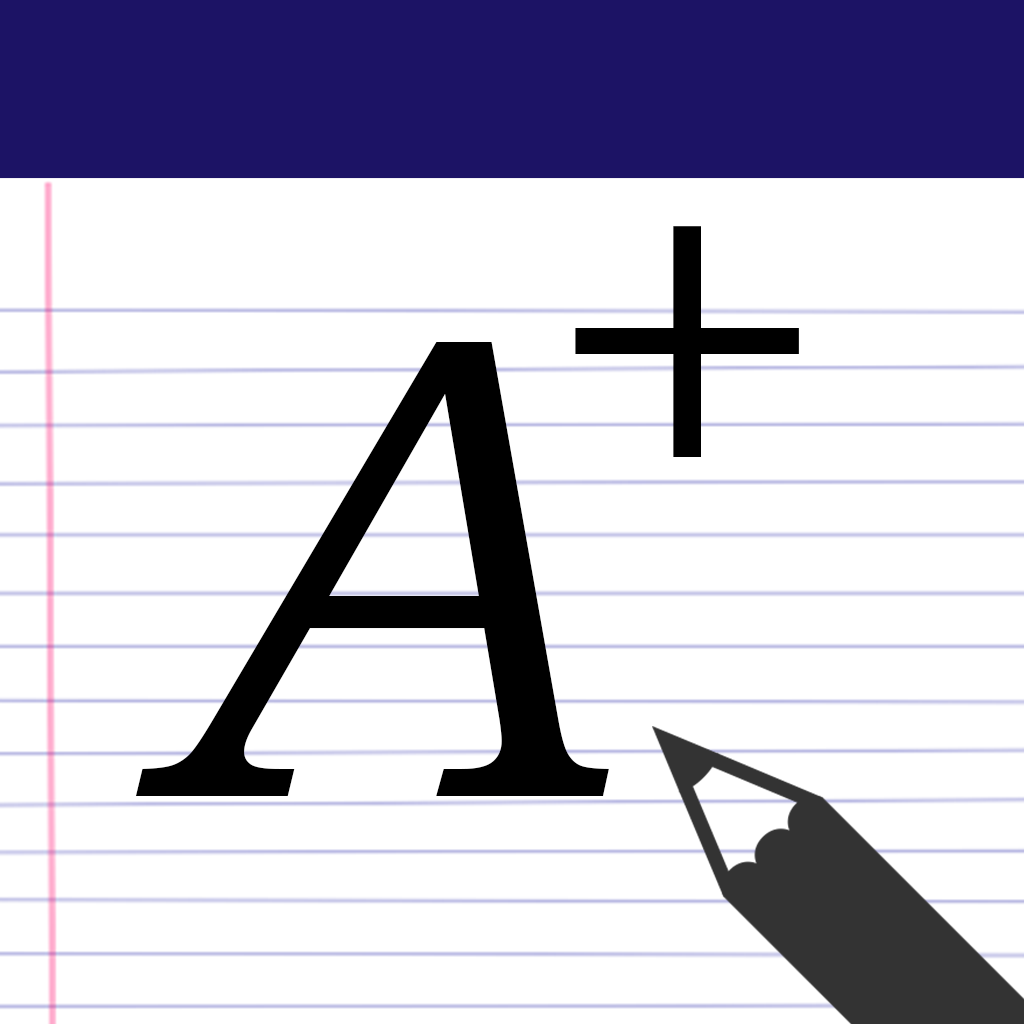
<style>
.page{position:relative;width:1024px;height:1024px;background:#ffffff}
.page>*{position:absolute;margin:0}
.t1{font:433.3px "MyriadPro-Regular";color:#000000}
.t2{font:666.7px "BookmanOldStyle-Italic";color:#000000}
</style>
<div class="page">
<p class="t1" style="left:575px;top:226px;width:224px;height:231px">+</p>
<p class="t2" style="left:135px;top:342px;width:474px;height:454px">A</p>
</div>
